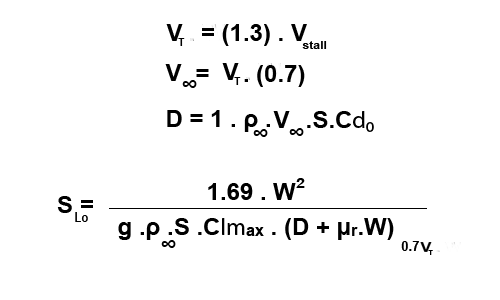
<style>
.page{position:relative;width:500px;height:300px;background:#ffffff}
.page>*{position:absolute;margin:0}
.t1{font:24px "Arial-BoldMT";color:#000000}
.t2{font:11px "Arial-BoldMT";color:#000000;scale:0.9 1}
.t3{font:10.9px "Arial-BoldMT";color:#000000;scale:1.12 1}
.t4{font:24px "MyriadPro-Regular";color:#000000}
.t5{font:14.2px "Arial-BoldMT";color:#000000;scale:1.13 1}
.t6{font:12.6px "Arial-BoldMT";color:#000000;scale:0.9 1}
.t7{font:12.9px "Arial-BoldMT";color:#000000}
.t8{font:6.4px "Arial-BoldMT";color:#000000;scale:1.07 1}
</style>
<div class="page">
<p class="t1" style="left:202px;top:24px;width:105px;height:22px">= (1.3) . V</p>
<p class="t2" style="left:178px;top:38px;width:7px;height:8px">T</p>
<p class="t3" style="left:302px;top:41px;width:25px;height:8px">stall</p>
<p class="t1" style="left:165px;top:64px;width:17px;height:17px">V</p>
<p class="t1" style="left:196px;top:65px;width:109px;height:22px">=     . (0.7)</p>
<p class="t2" style="left:234px;top:77px;width:7px;height:8px">T</p>
<p class="t1" style="left:182px;top:80px;width:15px;height:8px">∞</p>
<p class="t1" style="left:167px;top:110px;width:103px;height:22px">D = 1 . ρ .</p>
<p class="t1" style="left:273px;top:111px;width:17px;height:17px">V</p>
<p class="t1" style="left:307px;top:111px;width:67px;height:21px">.S.C<span class="t4">d₀</span></p>
<p class="t1" style="left:253px;top:129px;width:15px;height:8px">∞</p>
<p class="t1" style="left:289px;top:128px;width:15px;height:8px">∞</p>
<p class="t1" style="left:208px;top:183px;width:88px;height:17px">1.69 . W</p>
<p class="t5" style="left:296px;top:178px;width:9px;height:10px">2</p>
<p class="t1" style="left:57px;top:196px;width:36px;height:17px">S =</p>
<p class="t6" style="left:75px;top:212px;width:13px;height:10px">Lo</p>
<p class="t1" style="left:118px;top:218px;width:276px;height:22px">g .ρ .S .C<span class="t4">lm</span>ₐₓ . (D + μᵣ.W)</p>
<p class="t1" style="left:161px;top:240px;width:15px;height:8px">∞</p>
<p class="t7" style="left:401px;top:241px;width:18px;height:10px">0.7</p>
<p class="t8" style="left:428px;top:250px;width:5px;height:5px">T</p>
</div>
